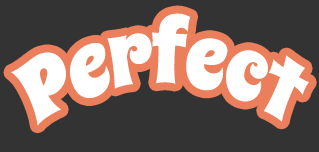
<style>
.page{position:relative;width:319px;height:152px;background:#333333}
.page>*{position:absolute;margin:0}
.t1{font:85.9px "SpicyRice-Regular";color:#ffffff;scale:0.81 1}
</style>
<div class="page">
<p class="t1" style="left:11px;top:13px;width:298px;height:113px">Perfect</p>
</div>
